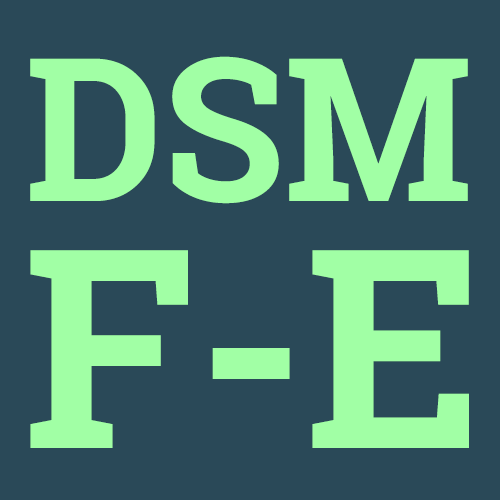
<style>
.page{position:relative;width:500px;height:500px;background:#2a4958}
.page>*{position:absolute;margin:0}
.t1{font:200px "RobotoSlab-Bold";color:#a1ffa5}
.t2{font:278px "RobotoSlab-Bold";color:#a1ffa5}
</style>
<div class="page">
<p class="t1" style="left:30px;top:56px;width:438px;height:148px">DSM</p>
<p class="t2" style="left:30px;top:250px;width:439px;height:198px">F-E</p>
</div>
